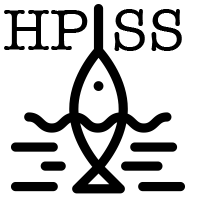
<style>
.page{position:relative;width:200px;height:200px;background:#ffffff}
.page>*{position:absolute;margin:0}
.t1{font:60px "AmericanTypewriter";color:#000000}
</style>
<div class="page">
<p class="t1" style="left:4px;top:9px;width:178px;height:42px">HP SS</p>
</div>
